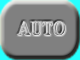
<style>
.page{position:relative;width:80px;height:60px;background:#808080}
.page>*{position:absolute;margin:0}
.t1{font:18px "MyungjoXB-HM"}
</style>
<div class="page">
<p class="t1" style="left:17px;top:21px;width:48px;height:14px">AUTO</p>
</div>
